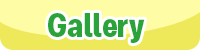
<style>
.page{position:relative;width:200px;height:50px;background:#fffca6}
.page>*{position:absolute;margin:0}
.t1{font:33.3px "FCIconicNoncommercial-BoldCondensed";color:#2aa33b}
</style>
<div class="page">
<p class="t1" style="left:48px;top:13px;width:97px;height:30px">Gallery</p>
</div>
